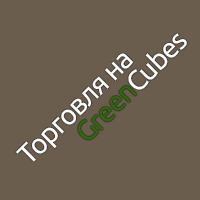
<style>
.page{position:relative;width:200px;height:200px;background:#6a5d4e}
.page>*{position:absolute;margin:0}
.t1{font:28px/25.1px "Ubuntu";letter-spacing:-0.04em;color:#fdfdfd}
.t2{font:28px/25.1px "Ubuntu";letter-spacing:-0.04em;color:#32690e}
</style>
<div class="page">
<p class="t1" style="left:16px;top:33px;width:171px;height:129px;text-align:center;rotate:-45deg">Торговля на<br><span class="t2">   Green</span>Cubes</p>
</div>
